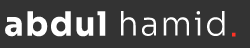
<style>
.page{position:relative;width:250px;height:48px;background:#333333}
.page>*{position:absolute;margin:0}
.t1{font:33.3px "Sora-Bold";letter-spacing:0.05em;color:#ffffff}
.t2{font:33.5px "Sora-Light";letter-spacing:0.05em;color:#ffffff}
.t3{font:37.5px "Sora-Light";letter-spacing:0.05em;color:#ff3225}
</style>
<div class="page">
<p class="t1" style="left:5px;top:11px;width:101px;height:26px">abdul</p>
<p class="t2" style="left:121px;top:11px;width:104px;height:25px">hamid</p>
<p class="t3" style="left:232px;top:32px;width:4px;height:5px">.</p>
</div>
